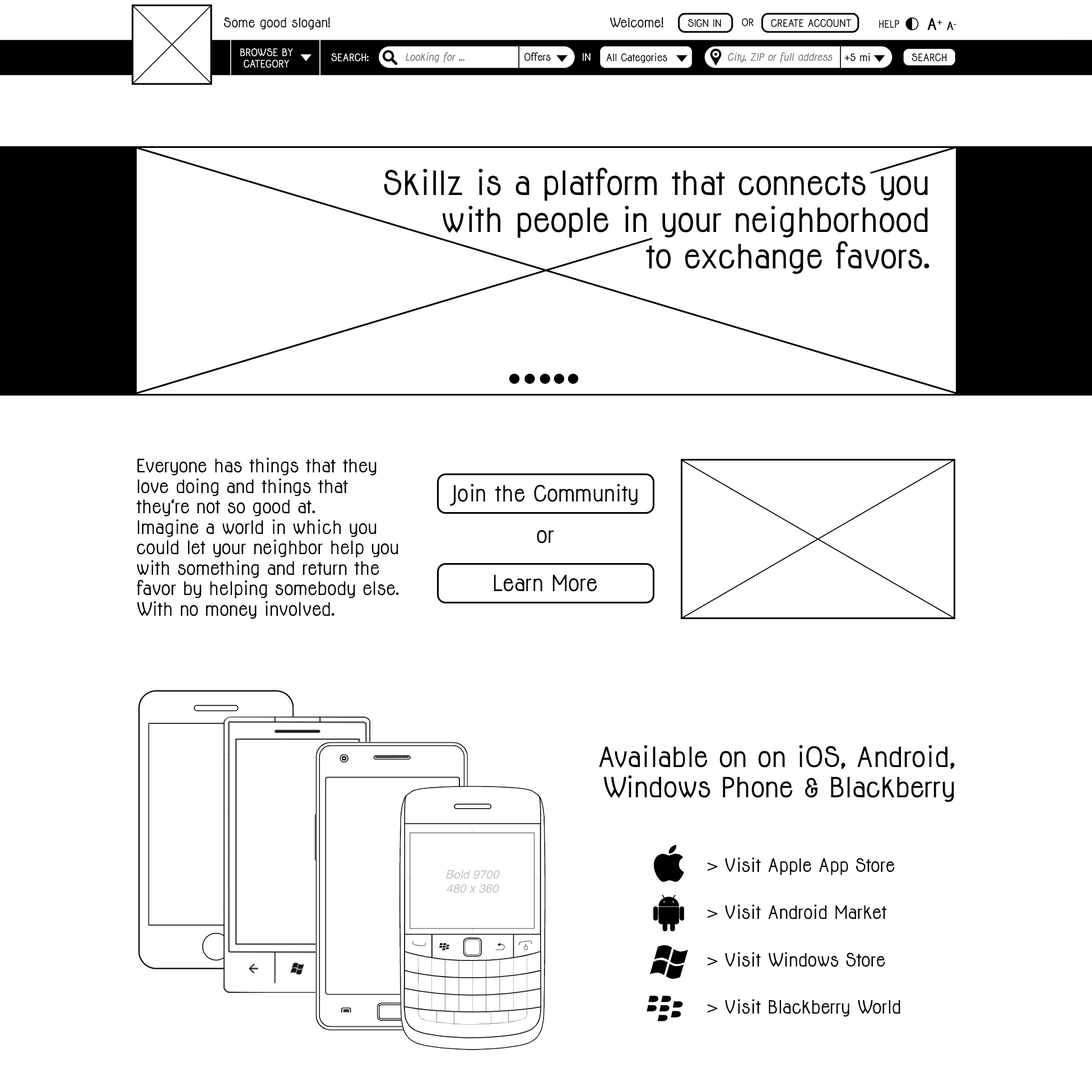
<style>
.page{position:relative;width:1092px;height:1092px;background:#ffffff}
.page>*{position:absolute;margin:0}
.t1{font:30.7px "Jolly-Bold";color:#000000}
.t2{font:17.1px "Jolly-Bold";color:#000000}
.t3{font:20.5px "Jolly-Bold";color:#000000}
.t4{font:25.6px "Jolly-Bold";letter-spacing:0.01em;color:#000000}
.t5{font:25.6px "Jolly-Bold";color:#000000}
.t6{font:16.8px/47.3px "Jolly-Bold";color:#000000}
</style>
<div class="page">
<p class="t1" style="left:384px;top:168px;width:546px;height:106px;text-align:right">Skillz is a platform that connects you with people in your neighborhood <br>to exchange favors.</p>
<p class="t2" style="left:136px;top:458px;width:263px;height:161px">Everyone has things that they love doing and things that <br>they‘re not so good at. <br>Imagine a world in which you could let your neighbor help you with something and return the favor by helping somebody else. With no money involved.</p>
<p class="t3" style="left:450px;top:484px;width:188px;height:22px">Join the Community</p>
<p class="t3" style="left:537px;top:530px;width:17px;height:13px">or</p>
<p class="t3" style="left:494px;top:574px;width:103px;height:18px">Learn More</p>
<p class="t4" style="left:599px;top:745px;width:356px;height:57px;text-align:right">Available on on iOS, Android, <span class="t5">Windows Phone &amp; Blackberry</span></p>
<p class="t6" style="left:708px;top:857px;width:192px;height:160px">&gt; Visit Apple App Store<br>&gt; Visit Android Market<br>&gt; Visit Windows Store<br>&gt; Visit Blackberry World</p>
</div>
